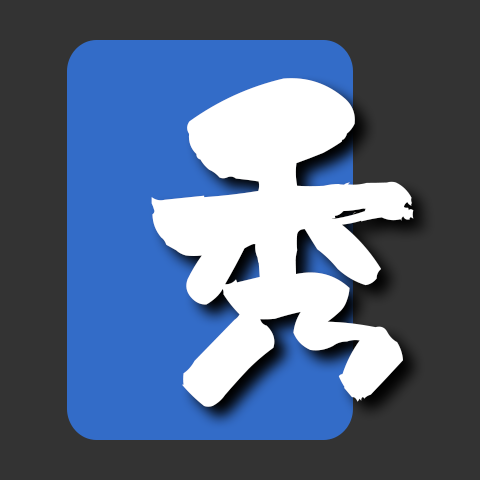
<style>
.page{position:relative;width:480px;height:480px;background:#333333}
.page>*{position:absolute;margin:0}
.t1{font:375px "AB_appare";color:#ffffff}
</style>
<div class="page">
<p class="t1" style="left:151px;top:78px;width:263px;height:329px">秀</p>
</div>
